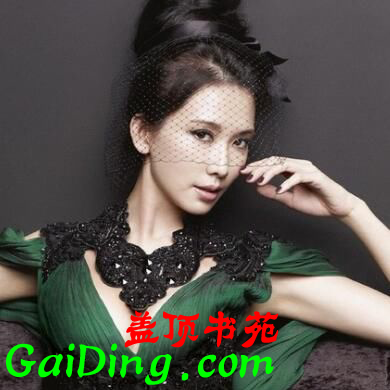
<style>
.page{position:relative;width:390px;height:390px}
.page>*{position:absolute;margin:0}
.t1{font:40px "HYf4gj";color:#ff0000}
.t2{font:48px "HYf4gj";color:#00ff00}
</style>
<div class="page">
<p class="t1" style="left:124px;top:310px;width:155px;height:38px">盖顶书苑</p>
<p class="t2" style="left:6px;top:343px;width:268px;height:42px">GaiDing.com</p>
</div>
